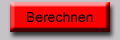
<style>
.page{position:relative;width:120px;height:40px;background:#ff0000}
.page>*{position:absolute;margin:0}
.t1{font:14px "ArialMT";color:#000000}
</style>
<div class="page">
<p class="t1" style="left:27px;top:12px;width:66px;height:10px">Berechnen</p>
</div>
